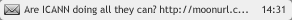
<style>
.page{position:relative;width:292px;height:20px;background:#efefef}
.page>*{position:absolute;margin:0}
.t1{font:10px "TrebuchetMS";color:#333333}
</style>
<div class="page">
<p class="t1" style="left:24px;top:5px;width:224px;height:10px">Are ICANN doing all they can? http://moonurl.c...</p>
<p class="t1" style="left:262px;top:5px;width:23px;height:8px">14:31</p>
</div>
